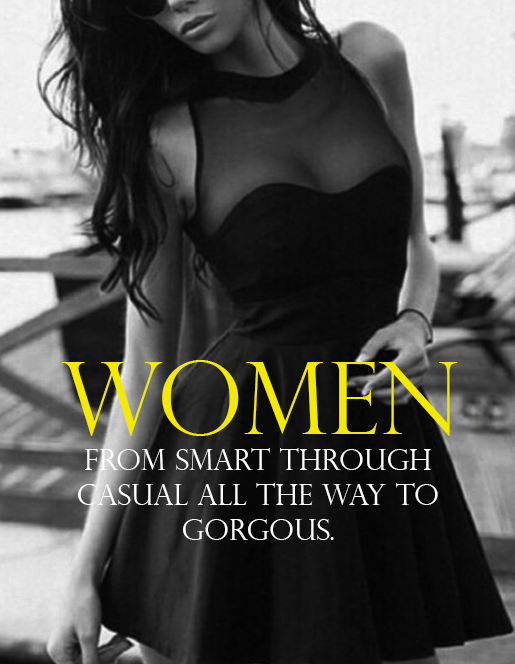
<style>
.page{position:relative;width:515px;height:664px}
.page>*{position:absolute;margin:0}
.t1{font:100px "PerpetuaTitlingMT-Light";letter-spacing:-0.005em;color:#f3ea00}
.t2{font:29.2px "PerpetuaTitlingMT-Light";letter-spacing:-0.005em;color:#ffffff}
</style>
<div class="page">
<p class="t1" style="left:62px;top:360px;width:396px;height:76px">women</p>
<p class="t2" style="left:78px;top:448px;width:360px;height:92px;text-align:center">from smart through casual all the way to gorgous.</p>
</div>
